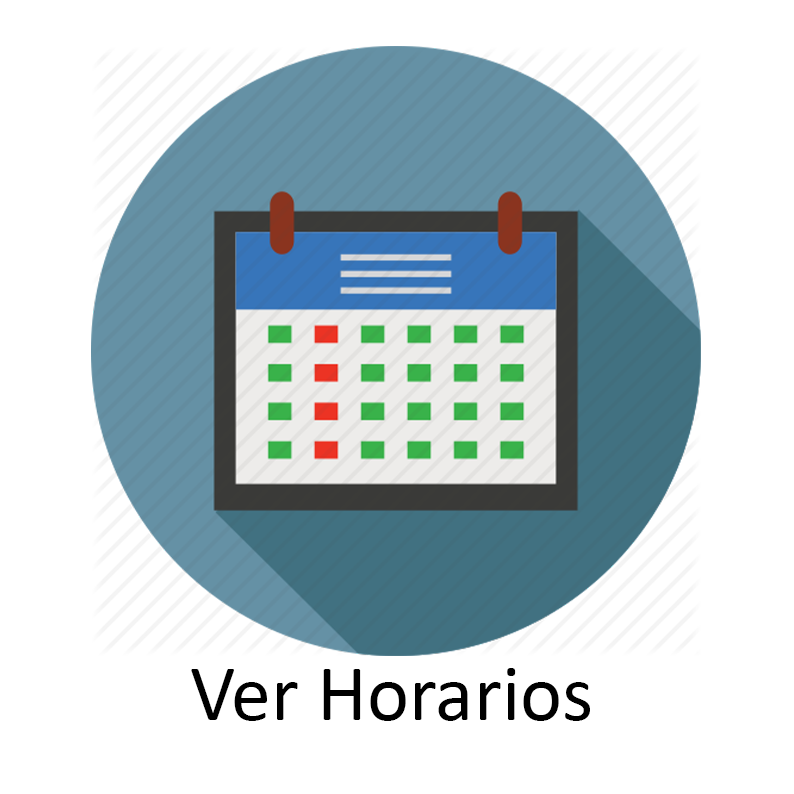
<style>
.page{position:relative;width:794px;height:794px;background:#ffffff}
.page>*{position:absolute;margin:0}
.t1{font:80px "Calibri";color:#000000}
</style>
<div class="page">
<p class="t1" style="left:191px;top:668px;width:399px;height:53px">Ver Horarios</p>
</div>
